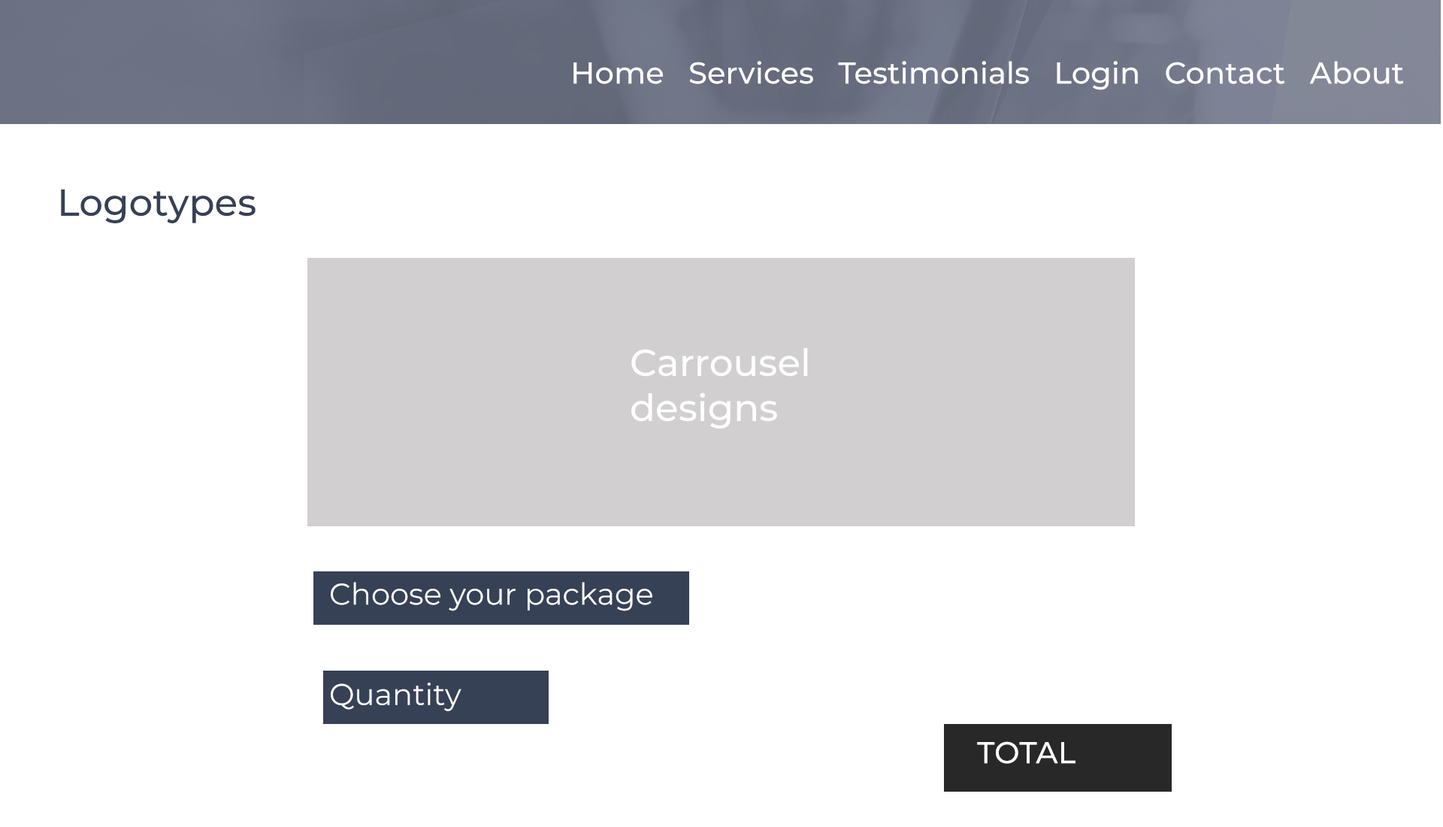
<style>
.page{position:relative;width:1443px;height:827px;background:#ffffff}
.page>*{position:absolute;margin:0}
.t1{font:37.6px "Montserrat-Medium";color:#364156}
.t2{font:37.6px "Montserrat-Medium";color:#ffffff}
.t3{font:30.1px "Montserrat-Regular";color:#ffffff}
.t4{font:30.1px "Montserrat-Medium";color:#ffffff}
</style>
<div class="page">
<p class="t1" style="left:61px;top:189px;width:194px;height:34px">Logotypes</p>
<p class="t2" style="left:631px;top:348px;width:177px;height:80px">Carrousel designs</p>
<p class="t3" style="left:331px;top:582px;width:321px;height:29px">Choose your package</p>
<p class="t3" style="left:331px;top:682px;width:130px;height:29px">Quantity</p>
<p class="t4" style="left:977px;top:741px;width:98px;height:22px">TOTAL</p>
</div>
